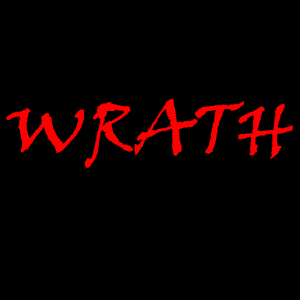
<style>
.page{position:relative;width:300px;height:300px;background:#000000}
.page>*{position:absolute;margin:0}
.t1{font:72px "VinerHandITC";color:#ff0000}
</style>
<div class="page">
<p class="t1" style="left:6px;top:99px;width:287px;height:69px">WRATH</p>
</div>
